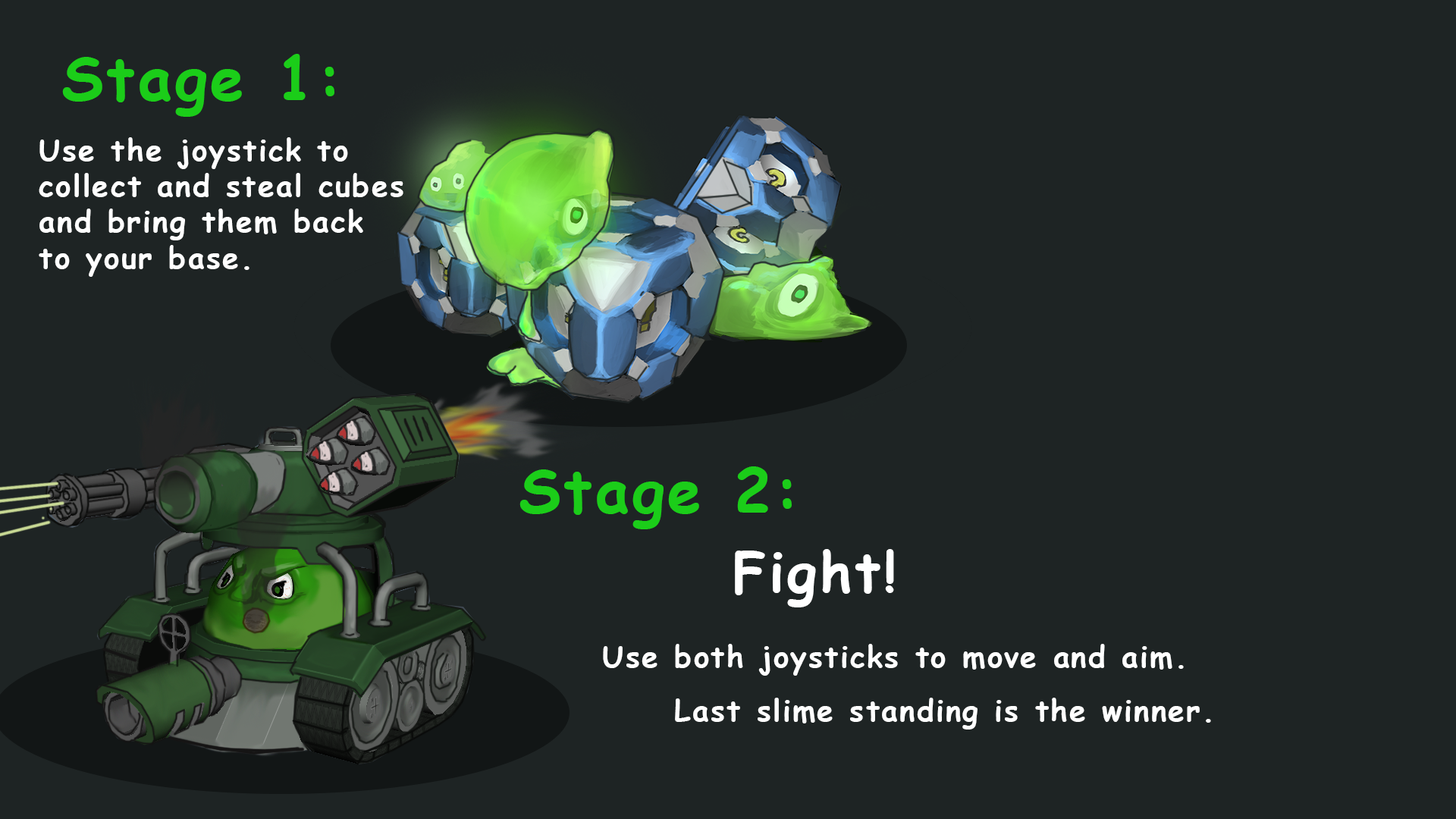
<style>
.page{position:relative;width:1456px;height:819px;background:#1e2424}
.page>*{position:absolute;margin:0}
.t1{font:60.7px "ComicSansMS-Bold";letter-spacing:0.05em;color:#1bcd19}
.t2{font:29.9px/17.9px "ComicSansMS-Bold";letter-spacing:0.05em;color:#ffffff}
.t3{font:55.5px "ComicSansMS-Bold";letter-spacing:0.05em;color:#ffffff}
</style>
<div class="page">
<p class="t1" style="left:62px;top:54px;width:272px;height:63px">Stage 1:</p>
<p class="t2" style="left:39px;top:137px;width:364px;height:140px">Use the joystick to<br><br>collect and steal cubes<br><br>and bring them back <br><br>to your base.</p>
<p class="t1" style="left:519px;top:466px;width:273px;height:63px">Stage 2:</p>
<p class="t3" style="left:735px;top:549px;width:159px;height:58px">Fight!</p>
<p class="t2" style="left:603px;top:644px;width:608px;height:86px">Use both joysticks to move and aim.<br><br><br>     Last slime standing is the winner.</p>
</div>
